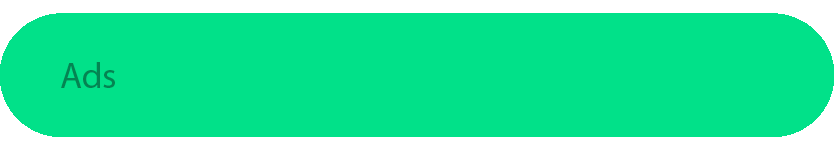
<style>
.page{position:relative;width:834px;height:150px;background:#01e189}
.page>*{position:absolute;margin:0}
.t1{font:36px "MyriadPro-Regular";color:#048452}
</style>
<div class="page">
<p class="t1" style="left:61px;top:62px;width:54px;height:26px">Ads</p>
</div>
